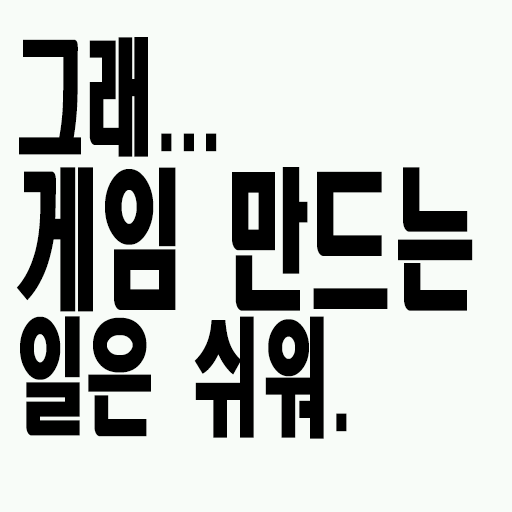
<style>
.page{position:relative;width:512px;height:512px;background:#f8fcf8}
.page>*{position:absolute;margin:0}
.t1{font:151.2px/140px "HeadlineR-HM";color:#000000;scale:0.56 1}
.t2{font:126px/140px "HeadlineR-HM";color:#000000;scale:0.56 1}
</style>
<div class="page">
<p class="t1" style="left:16px;top:37px;width:457px;height:402px"><span class="t2">그래...<br></span>게임 만드는<br><span class="t2">일은 쉬워.</span></p>
</div>
